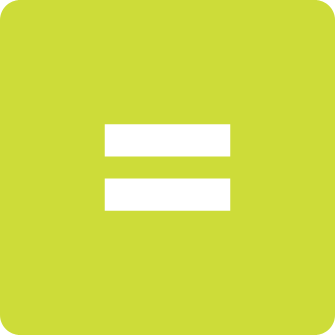
<style>
.page{position:relative;width:335px;height:335px;background:#cddc39}
.page>*{position:absolute;margin:0}
.t1{font:250px "ArialRoundedMTBold";letter-spacing:0.3em;color:#ffffff}
</style>
<div class="page">
<p class="t1" style="left:104px;top:124px;width:127px;height:87px">=</p>
</div>
